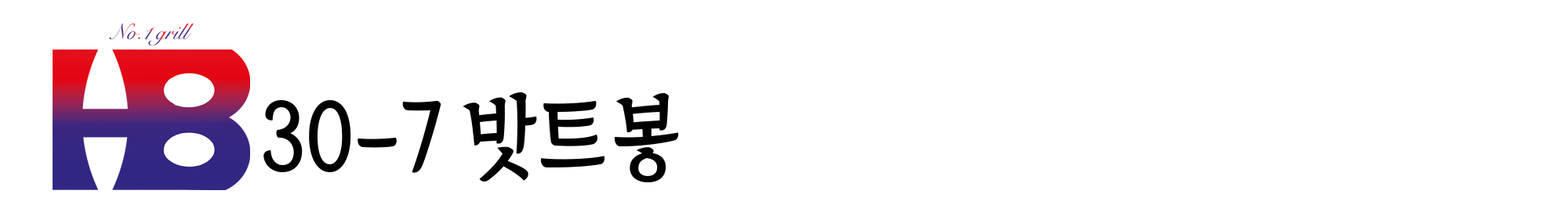
<style>
.page{position:relative;width:1568px;height:205px;background:#ffffff}
.page>*{position:absolute;margin:0}
.t1{font:93.7px "TheIndependenceHallofKorea-Regular";color:#000000;scale:0.89 1}
</style>
<div class="page">
<p class="t1" style="left:263px;top:93px;width:416px;height:90px">30-7 밧트봉</p>
</div>
